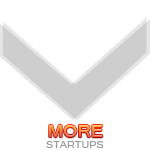
<style>
.page{position:relative;width:150px;height:150px;background:#ffffff}
.page>*{position:absolute;margin:0}
.t1{font:19.4px "Raavi";text-transform:uppercase;scale:1.05 1}
.t2{font:11.4px "Raavi";color:#999999;text-transform:uppercase;scale:1.05 1}
</style>
<div class="page">
<p class="t1" style="left:49px;top:125px;width:54px;height:12px">More</p>
<p class="t2" style="left:46px;top:141px;width:58px;height:7px">startups</p>
</div>
